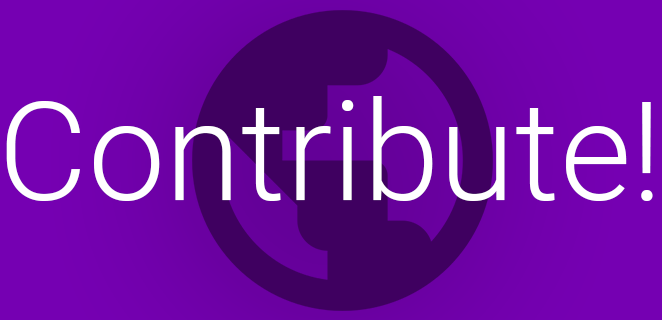
<style>
.page{position:relative;width:662px;height:320px;background:#3f0060}
.page>*{position:absolute;margin:0}
.t1{font:138px "Roboto-Light";color:#ffffff}
</style>
<div class="page">
<p class="t1" style="left:6px;top:96px;width:647px;height:105px">Contribute!</p>
</div>
